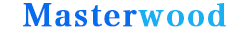
<style>
.page{position:relative;width:250px;height:30px;background:#ffffff}
.page>*{position:absolute;margin:0}
.t1{font:30px "HiraMinPro-W6";letter-spacing:0.05em;color:#056ded;font-weight:bold}
.t2{font:30px "HiraMinPro-W6";letter-spacing:0.05em;color:#18aff3;font-weight:bold}
</style>
<div class="page">
<p class="t1" style="left:23px;top:3px;width:203px;height:24px">Master<span class="t2">wood</span></p>
</div>
